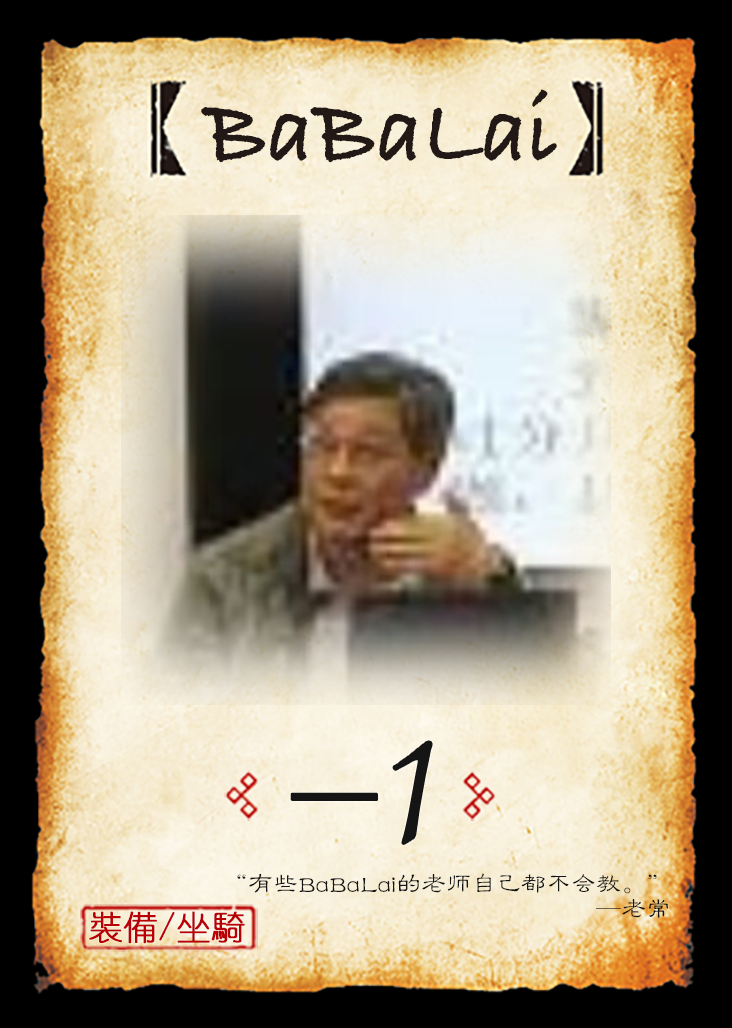
<style>
.page{position:relative;width:732px;height:1028px}
.page>*{position:absolute;margin:0}
.t1{font:95.8px "BradleyHandITCTT-Bold";color:#221815;scale:0.95 1}
.t2{font:191.7px "Jxixinkai";color:#151515}
.t3{font:25px/25px "FZLBJW--GB1-0";color:#151515}
.t4{font:33.3px "YouYuan";color:#ba0007;font-weight:bold}
</style>
<div class="page">
<p class="t1" style="left:201px;top:89px;width:356px;height:74px">BaBaLai</p>
<p class="t2" style="left:393px;top:741px;width:39px;height:103px">1</p>
<p class="t3" style="left:237px;top:873px;width:431px;height:45px;text-align:right">“有些BaBaLai的老师自己都不会教。”<br>—老常</p>
<p class="t4" style="left:89px;top:911px;width:156px;height:33px">裝備/坐騎</p>
</div>
